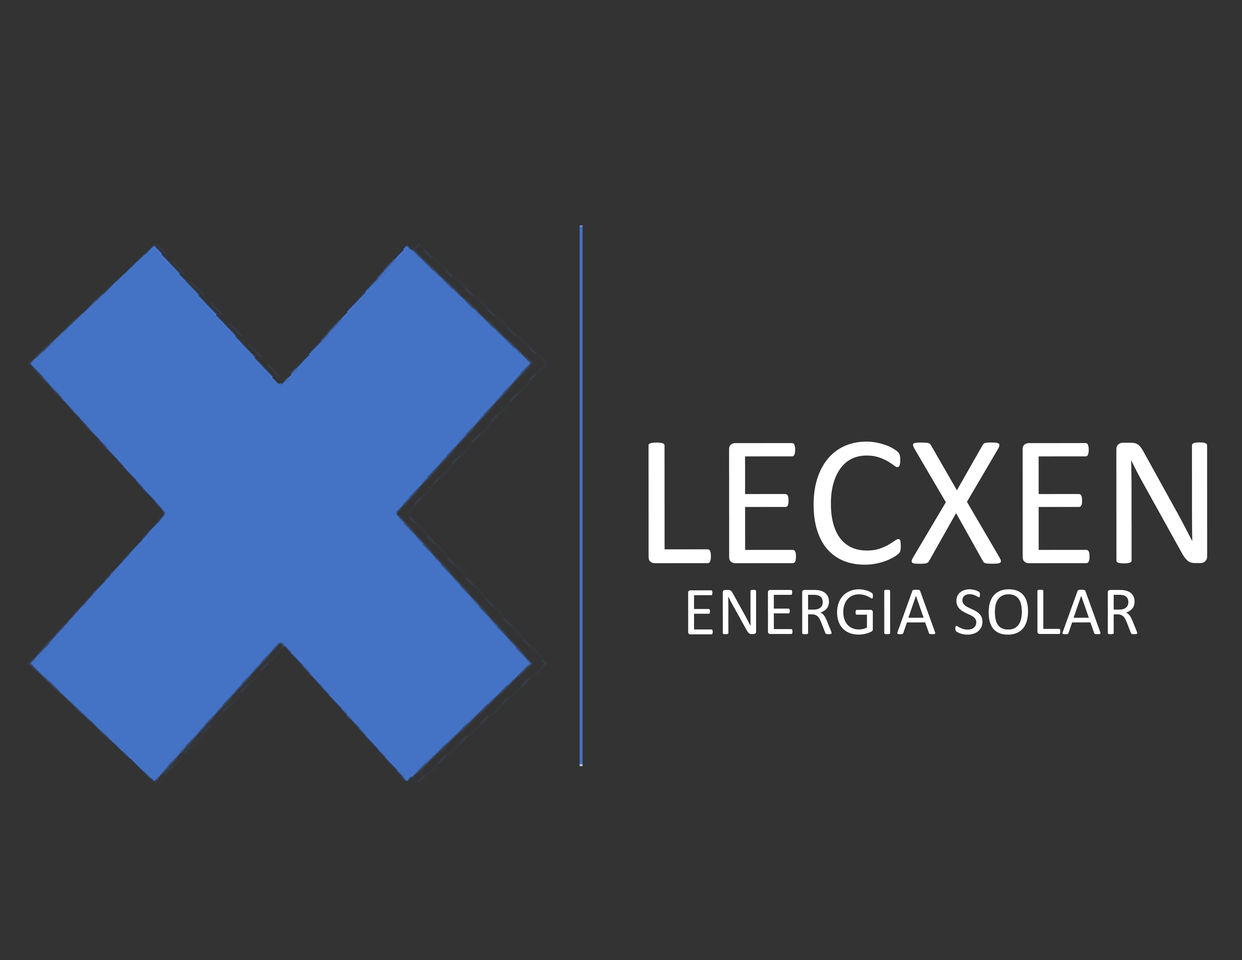
<style>
.page{position:relative;width:1242px;height:960px;background:#333333}
.page>*{position:absolute;margin:0}
.t1{font:190px "Calibri";letter-spacing:0.005em;color:#ffffff}
.t2{font:69.7px "Calibri";letter-spacing:0.005em;color:#ffffff}
</style>
<div class="page">
<p class="t1" style="left:649px;top:442px;width:559px;height:123px">LECXEN</p>
<p class="t2" style="left:688px;top:589px;width:450px;height:46px">ENERGIA SOLAR</p>
</div>
